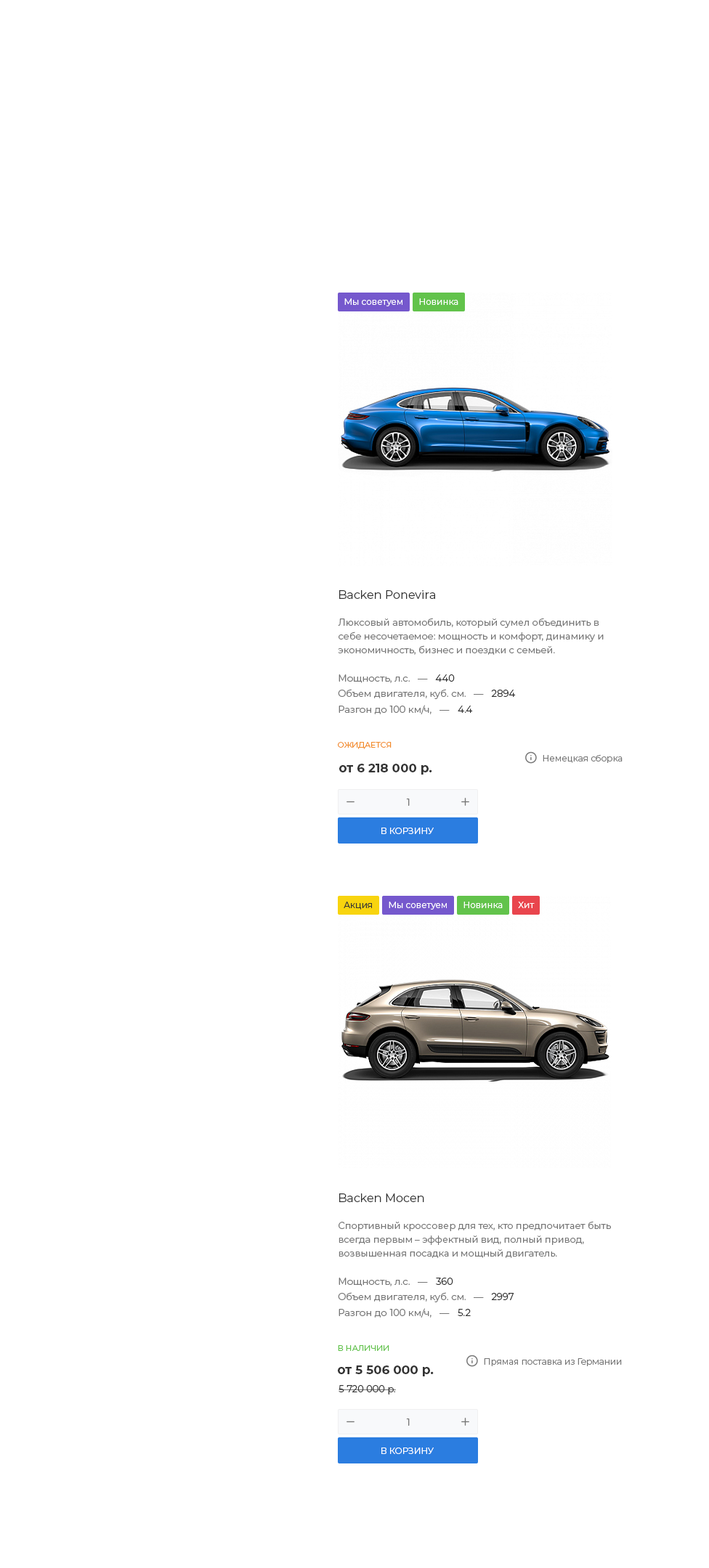
<style>
.page{position:relative;width:709px;height:1568px;background:#ffffff}
.page>*{position:absolute;margin:0}
.t1{font:8.7px "Montserrat-Regular";color:#ffffff}
.t2{font:11.6px "Montserrat-Regular";color:#333333}
.t3{font:9.4px/13.8px "Montserrat-Regular";color:#777777}
.t4{font:9.4px "Montserrat-Regular";color:#777777}
.t5{font:9.4px "Montserrat-Regular";color:#333333}
.t6{font:8px "Montserrat-Regular";color:#f28c29}
.t7{font:8.7px "Montserrat-Regular";color:#777777}
.t8{font:12.3px "Montserrat-Bold";color:#333333}
.t9{font:8.7px "Montserrat-Regular";color:#333333}
.t10{font:8px "Montserrat-Regular";color:#62c34b}
</style>
<div class="page">
<p class="t1" style="left:344px;top:298px;width:58px;height:8px">Мы советуем</p>
<p class="t1" style="left:419px;top:298px;width:39px;height:7px">Новинка</p>
<p class="t2" style="left:339px;top:590px;width:96px;height:9px">Backen Ponevira</p>
<p class="t3" style="left:338px;top:618px;width:265px;height:37px">Люксовый автомобиль, который сумел объединить в себе несочетаемое: мощность и комфорт, динамику и экономичность, бизнес и поездки с семьей.</p>
<p class="t4" style="left:338px;top:674px;width:71px;height:9px">Мощность, л.с.</p>
<p class="t5" style="left:435px;top:674px;width:19px;height:8px">440</p>
<p class="t4" style="left:338px;top:689px;width:127px;height:10px">Объем двигателя, куб. см.</p>
<p class="t4" style="left:417px;top:679px;width:11px;height:0px">—</p>
<p class="t5" style="left:491px;top:690px;width:24px;height:7px">2894</p>
<p class="t4" style="left:473px;top:694px;width:10px;height:1px">—</p>
<p class="t4" style="left:338px;top:705px;width:93px;height:9px">Разгон до 100 км/ч,</p>
<p class="t4" style="left:439px;top:710px;width:10px;height:1px">—</p>
<p class="t5" style="left:457px;top:706px;width:16px;height:7px">4.4</p>
<p class="t6" style="left:338px;top:742px;width:53px;height:7px">ОЖИДАЕТСЯ</p>
<p class="t7" style="left:542px;top:754px;width:80px;height:9px">Немецкая сборка</p>
<p class="t8" style="left:339px;top:764px;width:93px;height:11px">от 6 218 000 р.</p>
<p class="t4" style="left:406px;top:799px;width:3px;height:7px">1</p>
<p class="t1" style="left:381px;top:828px;width:52px;height:6px">В КОРЗИНУ</p>
<p class="t9" style="left:343px;top:902px;width:29px;height:8px">Акция</p>
<p class="t1" style="left:388px;top:902px;width:58px;height:8px">Мы советуем</p>
<p class="t1" style="left:463px;top:902px;width:39px;height:6px">Новинка</p>
<p class="t1" style="left:518px;top:902px;width:16px;height:6px">Хит</p>
<p class="t2" style="left:339px;top:1193px;width:85px;height:9px">Backen Mocen</p>
<p class="t3" style="left:338px;top:1221px;width:273px;height:37px">Спортивный кроссовер для тех, кто предпочитает быть всегда первым – эффектный вид, полный привод, возвышенная посадка и мощный двигатель.</p>
<p class="t4" style="left:338px;top:1278px;width:71px;height:8px">Мощность, л.с.</p>
<p class="t5" style="left:436px;top:1278px;width:17px;height:7px">360</p>
<p class="t4" style="left:417px;top:1282px;width:11px;height:1px">—</p>
<p class="t4" style="left:338px;top:1292px;width:127px;height:10px">Объем двигателя, куб. см.</p>
<p class="t4" style="left:473px;top:1297px;width:10px;height:1px">—</p>
<p class="t5" style="left:491px;top:1293px;width:23px;height:7px">2997</p>
<p class="t4" style="left:338px;top:1308px;width:93px;height:10px">Разгон до 100 км/ч,</p>
<p class="t4" style="left:439px;top:1313px;width:10px;height:1px">—</p>
<p class="t5" style="left:457px;top:1309px;width:13px;height:7px">5.2</p>
<p class="t10" style="left:338px;top:1345px;width:51px;height:6px">В НАЛИЧИИ</p>
<p class="t7" style="left:483px;top:1358px;width:138px;height:8px">Прямая поставка из Германии</p>
<p class="t8" style="left:338px;top:1365px;width:95px;height:11px">от 5 506 000 р.</p>
<p class="t5" style="left:338px;top:1385px;width:58px;height:10px">5 720 000 р.</p>
<p class="t4" style="left:406px;top:1418px;width:3px;height:8px">1</p>
<p class="t1" style="left:381px;top:1447px;width:52px;height:7px">В КОРЗИНУ</p>
</div>
